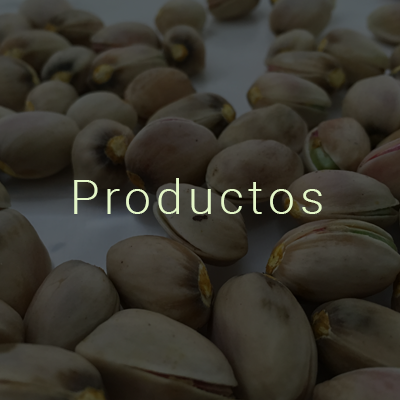
<style>
.page{position:relative;width:400px;height:400px}
.page>*{position:absolute;margin:0}
.t1{font:48px "Roboto-Light";letter-spacing:0.1em;color:#e4f6c8}
</style>
<div class="page">
<p class="t1" style="left:74px;top:178px;width:248px;height:36px">Productos</p>
</div>
